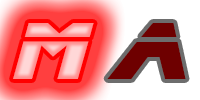
<style>
.page{position:relative;width:200px;height:100px;background:#ffffff}
.page>*{position:absolute;margin:0}
.t1{font:81.9px "BladeRunnerMovieFont"}
.t2{font:81.9px "BladeRunnerMovieFont";color:#6e0000}
</style>
<div class="page">
<p class="t1" style="left:13px;top:23px;width:81px;height:56px">M</p>
<p class="t2" style="left:107px;top:23px;width:79px;height:56px">a</p>
</div>
